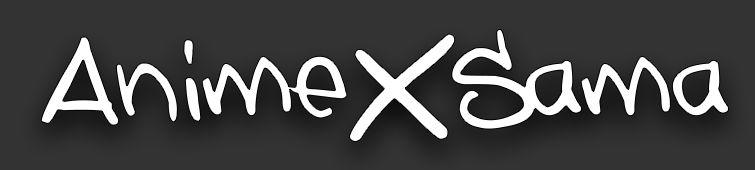
<style>
.page{position:relative;width:755px;height:170px;background:#333333}
.page>*{position:absolute;margin:0}
.t1{font:200px ""STYLEWARS2011"";color:#ffffff}
.t2{font:250px ""STYLEWARS2011"";color:#ffffff}
</style>
<div class="page">
<p class="t1" style="left:40px;top:28px;width:689px;height:114px">Anime<span class="t2">X</span>Sama</p>
</div>
